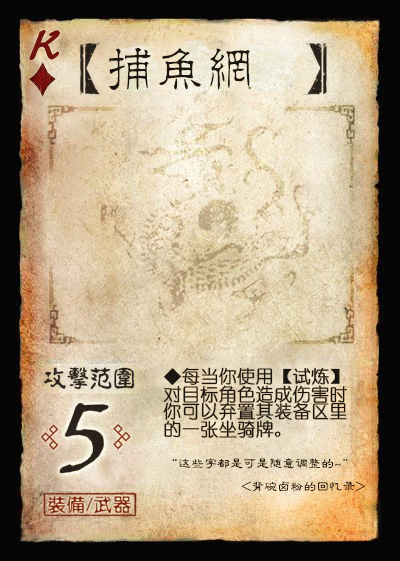
<style>
.page{position:relative;width:400px;height:561px}
.page>*{position:absolute;margin:0}
.t1{font:50px "Jxixinkai";color:#661213;font-weight:bold;font-style:italic}
.t2{font:50px "¾­µä·±½ÇÁ¥ Regular";color:#161616}
.t3{font:18px/17.5px "YouYuan";color:#161616;font-weight:bold}
.t4{font:13px "FZLBJW--GB1-0";color:#161616}
</style>
<div class="page">
<p class="t1" style="left:30px;top:30px;width:30px;height:30px">K</p>
<p class="t2" style="left:109px;top:48px;width:141px;height:42px">捕鱼网</p>
<p class="t3" style="left:163px;top:367px;width:185px;height:71px">◆每当你使用【试炼】<br>对目标角色造成伤害时<br>你可以弃置其装备区里<br>的一张坐骑牌。</p>
<p class="t4" style="left:172px;top:458px;width:176px;height:11px">“这些字都是可是随意调整的~”</p>
<p class="t4" style="left:241px;top:481px;width:125px;height:11px">&lt;背碗卤粉的回忆录&gt;</p>
</div>
